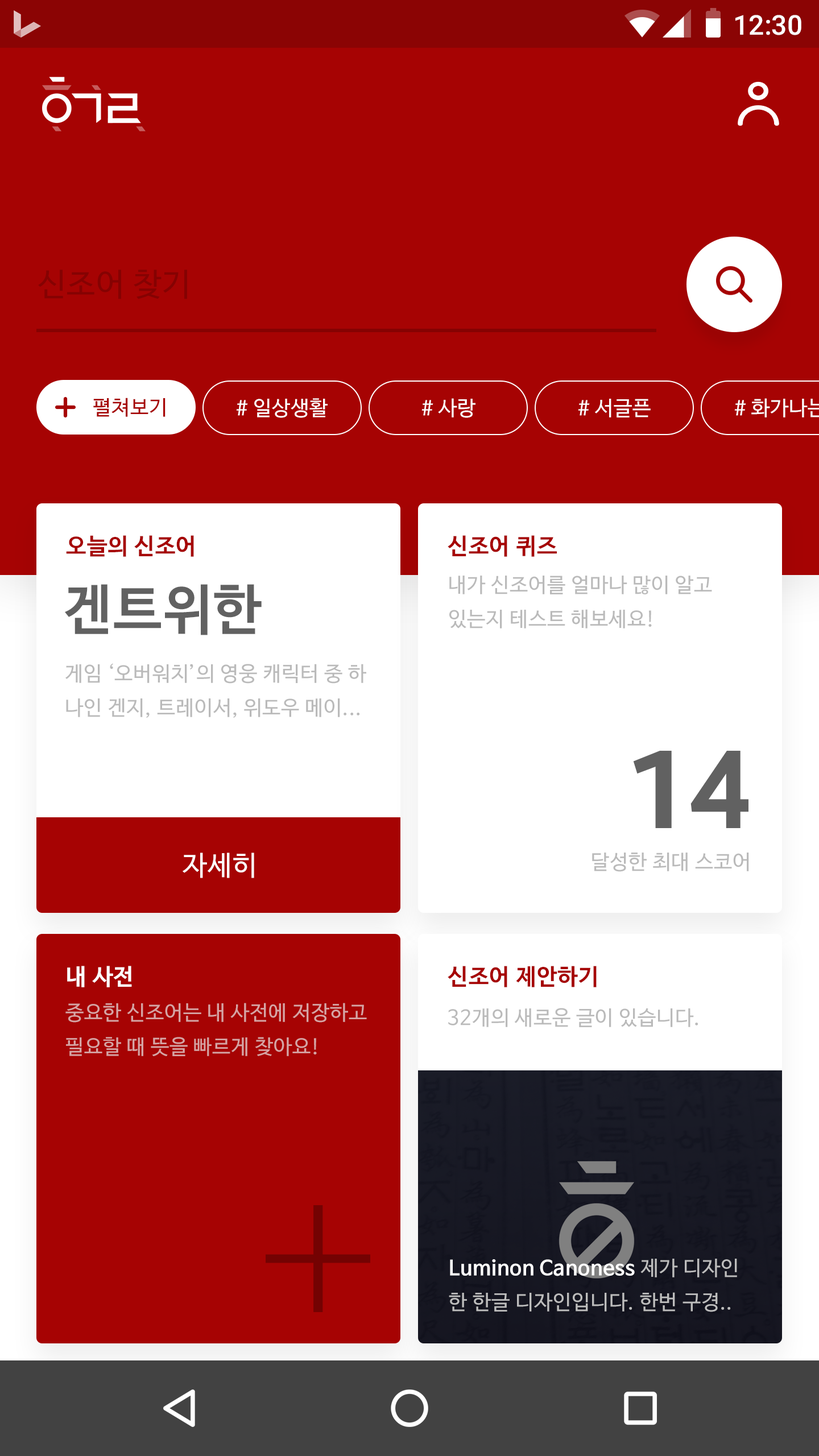
<style>
.page{position:relative;width:819px;height:1456px;background:#a60303}
.page>*{position:absolute;margin:0}
.t1{font:27.3px "Roboto-Medium";color:#ffffff}
.t2{font:31.8px "NanumBarunGothic";letter-spacing:0.025em;color:#850202}
.t3{font:20.5px "NanumBarunGothic";letter-spacing:0.025em;color:#a60303}
.t4{font:20.5px "NanumBarunGothic";letter-spacing:0.025em;color:#ffffff}
.t5{font:22.7px "NanumBarunGothicBold";letter-spacing:0.025em;color:#a60303}
.t6{font:20.5px/34.1px "NanumBarunGothic";letter-spacing:0.025em;color:#bababa}
.t7{font:54.6px "NanumBarunGothicBold";letter-spacing:0.025em;color:#616161}
.t8{font:111.5px "BreezeSans-Bold";color:#616161}
.t9{font:27.3px "NanumBarunGothic";letter-spacing:0.025em;color:#ffffff}
.t10{font:20.5px "NanumBarunGothic";letter-spacing:0.025em;color:#bababa}
.t11{font:22.7px "NanumBarunGothicBold";letter-spacing:0.025em;color:#ffffff}
.t12{font:20.5px/34.1px "NanumBarunGothic";letter-spacing:0.025em;color:#d6a4a4}
.t13{font:20.5px/34.1px "NanumBarunGothic";letter-spacing:0.025em;color:#bdbdbd}
.t14{font:20.5px/34.1px "NanumBarunGothicBold";letter-spacing:0.025em;color:#ffffff}
</style>
<div class="page">
<p class="t1" style="left:735px;top:15px;width:66px;height:20px">12:30</p>
<p class="t2" style="left:38px;top:270px;width:149px;height:29px">신조어 찾기</p>
<p class="t3" style="left:93px;top:398px;width:73px;height:19px">펼쳐보기</p>
<p class="t4" style="left:236px;top:398px;width:92px;height:20px"># 일상생활</p>
<p class="t4" style="left:421px;top:398px;width:54px;height:20px"># 사랑</p>
<p class="t4" style="left:578px;top:399px;width:73px;height:18px"># 서글픈</p>
<p class="t5" style="left:66px;top:535px;width:128px;height:22px">오늘의 신조어</p>
<p class="t5" style="left:448px;top:535px;width:109px;height:22px">신조어 퀴즈</p>
<p class="t6" style="left:449px;top:576px;width:263px;height:52px">내가 신조어를 얼마나 많이 알고 <br>있는지 테스트 해보세요!</p>
<p class="t7" style="left:65px;top:584px;width:197px;height:51px">겐트위한</p>
<p class="t6" style="left:65px;top:663px;width:301px;height:55px">게임 ‘오버워치’의 영웅 캐릭터 중 하<br>나인 겐지, 트레이서, 위도우 메이...</p>
<p class="t8" style="left:633px;top:751px;width:115px;height:77px">14</p>
<p class="t9" style="left:183px;top:853px;width:71px;height:25px">자세히</p>
<p class="t10" style="left:592px;top:853px;width:157px;height:19px">달성한 최대 스코어</p>
<p class="t11" style="left:67px;top:966px;width:65px;height:21px">내 사전</p>
<p class="t5" style="left:448px;top:966px;width:149px;height:21px">신조어 제안하기</p>
<p class="t12" style="left:65px;top:1003px;width:302px;height:53px">중요한 신조어는 내 사전에 저장하고<br>필요할 때 뜻을 빠르게 찾아요!</p>
<p class="t10" style="left:448px;top:1008px;width:250px;height:19px">32개의 새로운 글이 있습니다.</p>
<p class="t13" style="left:449px;top:1259px;width:288px;height:53px"><span class="t14">Luminon Canoness </span>제가 디자인<br>한 한글 디자인입니다. 한번 구경..</p>
</div>
